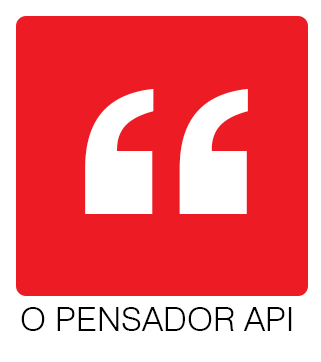
<style>
.page{position:relative;width:321px;height:362px;background:#ed1c24}
.page>*{position:absolute;margin:0}
.t1{font:369.4px "Swiss721BT-Heavy";color:#ffffff}
.t2{font:33.8px "Swiss721BT-Light";color:#000000}
</style>
<div class="page">
<p class="t1" style="left:85px;top:89px;width:163px;height:125px">“</p>
<p class="t2" style="left:21px;top:307px;width:271px;height:24px">O PENSADOR API</p>
</div>
